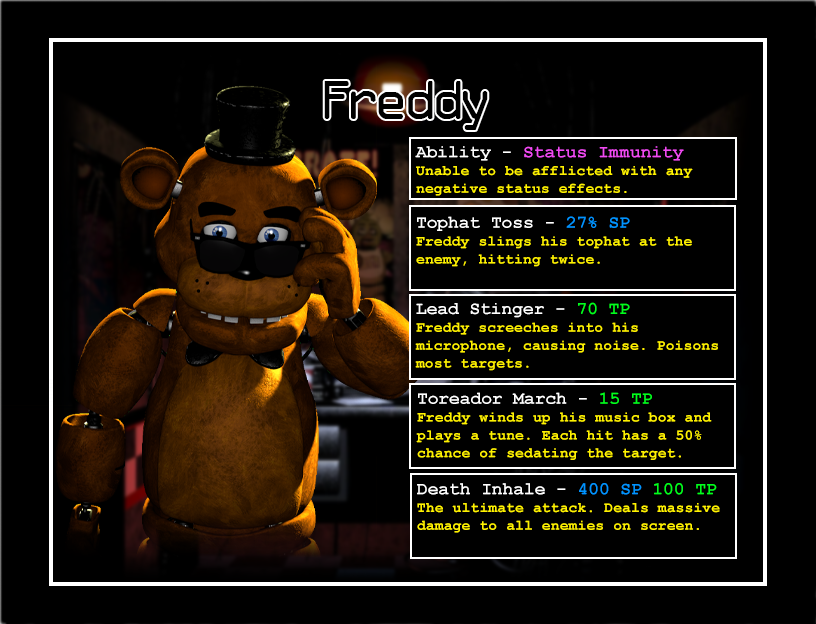
<style>
.page{position:relative;width:816px;height:624px;background:#000000}
.page>*{position:absolute;margin:0}
.t1{font:48px "OCR-A";color:#000000}
.t2{font:14.9px "CourierNewPS-BoldMT";color:#fff200}
.t3{font:17.8px "CourierNewPS-BoldMT";color:#ffffff}
.t4{font:17.8px "CourierNewPS-BoldMT";color:#f14bf3}
.t5{font:17.8px "CourierNewPS-BoldMT";color:#0094ff}
.t6{font:17.8px "CourierNewPS-BoldMT";color:#00fe1e}
</style>
<div class="page">
<p class="t1" style="left:324px;top:81px;width:164px;height:49px">Freddy</p>
<p class="t2" style="left:415px;top:146px;width:278px;height:50px"><span class="t3">Ability - </span><span class="t4">Status Immunity<br></span>Unable to be afflicted with any negative status effects.</p>
<p class="t2" style="left:416px;top:216px;width:276px;height:51px"><span class="t3">Tophat Toss - </span><span class="t5">27% SP<br></span>Freddy slings his tophat at the enemy, hitting twice.</p>
<p class="t2" style="left:415px;top:302px;width:303px;height:69px"><span class="t3">Lead Stinger - </span><span class="t6">70 TP<br></span>Freddy screeches into his<br>microphone, causing noise. Poisons most targets.</p>
<p class="t2" style="left:416px;top:392px;width:296px;height:68px"><span class="t3">Toreador March - </span><span class="t6">15 TP<br></span>Freddy winds up his music box and plays a tune. Each hit has a 50% chance of sedating the target.</p>
<p class="t2" style="left:417px;top:483px;width:303px;height:50px"><span class="t3">Death Inhale - </span><span class="t5">400 SP </span><span class="t6">100 TP<br></span>The ultimate attack. Deals massive damage to all enemies on screen.</p>
</div>
